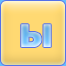
<style>
.page{position:relative;width:66px;height:66px}
.page>*{position:absolute;margin:0}
.t1{font:41px "Tahoma-Bold"}
</style>
<div class="page">
<p class="t1" style="left:21px;top:24px;width:30px;height:23px">ы</p>
</div>
